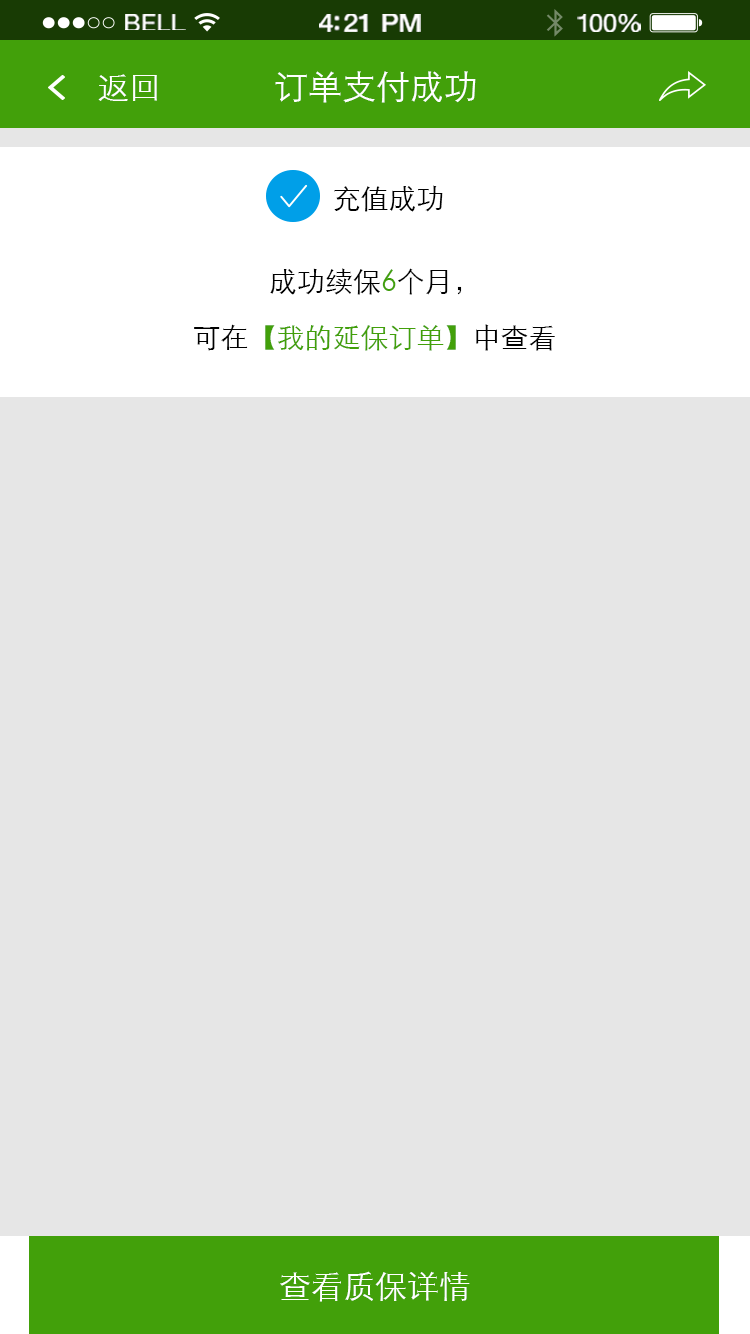
<style>
.page{position:relative;width:750px;height:1334px;background:#e6e6e6}
.page>*{position:absolute;margin:0}
.t1{font:23.3px "HelveticaNeue";letter-spacing:0.02em;color:#ffffff;scale:1.06 1}
.t2{font:25.3px "HelveticaNeue-Medium";letter-spacing:-0.02em;color:#ffffff;scale:1.06 1}
.t3{font:24.3px "HelveticaNeue";letter-spacing:-0.02em;color:#ffffff;scale:1.06 1}
.t4{font:32px "STXihei";color:#ffffff}
.t5{font:34px "STXihei";color:#ffffff}
.t6{font:28px "STXihei";color:#000000}
.t7{font:28px/56px "STXihei";color:#42a00a}
.t8{font:28px/56px "STXihei";color:#000000}
</style>
<div class="page">
<p class="t1" style="left:125px;top:14px;width:61px;height:16px">BELL</p>
<p class="t2" style="left:319px;top:14px;width:102px;height:18px">4:21 PM</p>
<p class="t3" style="left:577px;top:14px;width:64px;height:18px">100%</p>
<p class="t4" style="left:98px;top:74px;width:59px;height:27px">返回</p>
<p class="t5" style="left:275px;top:71px;width:201px;height:32px">订单支付成功</p>
<p class="t6" style="left:334px;top:185px;width:109px;height:27px">充值成功</p>
<p class="t7" style="left:194px;top:268px;width:361px;height:83px;text-align:center"><span class="t8">成功续保</span>6<span class="t8">个月，<br>可在</span>【我的延保订单】<span class="t8">中查看</span></p>
<p class="t4" style="left:280px;top:1271px;width:190px;height:31px">查看质保详情</p>
</div>
